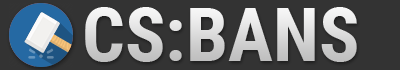
<style>
.page{position:relative;width:400px;height:70px;background:#333333}
.page>*{position:absolute;margin:0}
.t1{font:75px "RobotoCondensed-Bold"}
</style>
<div class="page">
<p class="t1" style="left:85px;top:7px;width:272px;height:55px">CS:BANS</p>
</div>
